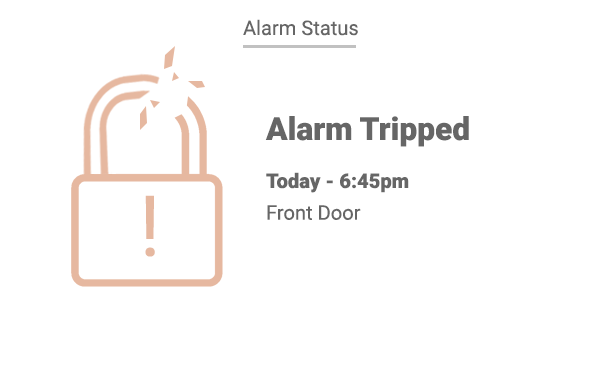
<style>
.page{position:relative;width:600px;height:371px;background:#ffffff}
.page>*{position:absolute;margin:0}
.t1{font:20.1px "Roboto-Regular";color:#666666}
.t2{font:31.8px "Roboto-Black";color:#666666}
.t3{font:20.1px/31.8px "Roboto-Black";color:#666666}
.t4{font:20.1px/31.8px "Roboto-Regular";color:#666666}
.t5{font:84.7px "Roboto-Regular";color:#e6b8a0}
</style>
<div class="page">
<p class="t1" style="left:243px;top:19px;width:115px;height:17px">Alarm Status</p>
<p class="t2" style="left:265px;top:116px;width:204px;height:31px">Alarm Tripped</p>
<p class="t3" style="left:266px;top:172px;width:143px;height:48px">Today - 6:45pm<br><span class="t4">Front Door</span></p>
<p class="t5" style="left:145px;top:195px;width:10px;height:62px">!</p>
</div>
